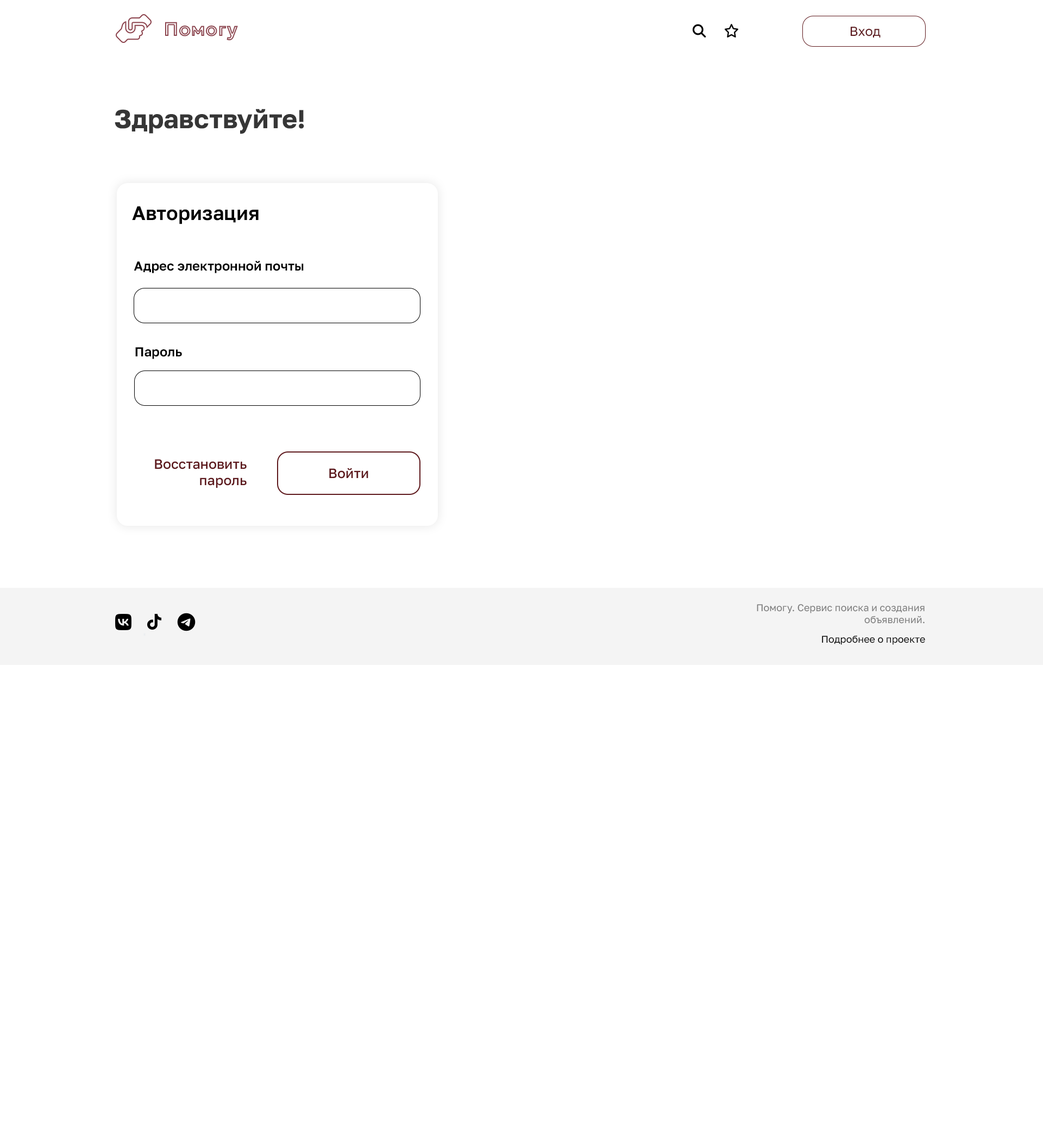
<style>
.page{position:relative;width:1043px;height:1143px;background:#ffffff}
.page>*{position:absolute;margin:0}
.t1{font:19.6px "Geologica-Bold"}
.t2{font:13px "GolosText-Regular";color:#5e191d}
.t3{font:26.1px "GolosText-Bold";color:#363636}
.t4{font:19.6px "GolosText-SemiBold";color:#020202}
.t5{font:13px "GolosText-SemiBold";color:#020202}
.t6{font:13.6px "GolosText-Medium";color:#5e191d}
.t7{font:9.8px "GolosText-Regular";color:#7c7c7c}
.t8{font:9.8px "GolosText-Regular";color:#000000}
</style>
<div class="page">
<p class="t1" style="left:165px;top:22px;width:73px;height:19px">Помогу</p>
<p class="t2" style="left:850px;top:27px;width:31px;height:11px">Вход</p>
<p class="t3" style="left:115px;top:109px;width:189px;height:25px">Здравствуйте!</p>
<p class="t4" style="left:132px;top:206px;width:127px;height:18px">Авторизация</p>
<p class="t5" style="left:134px;top:261px;width:170px;height:12px">Адрес электронной почты</p>
<p class="t5" style="left:135px;top:347px;width:47px;height:12px">Пароль</p>
<p class="t6" style="left:155px;top:459px;width:92px;height:29px;text-align:right">Восстановить<br>пароль</p>
<p class="t6" style="left:329px;top:468px;width:39px;height:11px">Войти</p>
<p class="t7" style="left:757px;top:604px;width:168px;height:20px;text-align:right">Помогу. Сервис поиска и создания<br>объявлений.</p>
<p class="t8" style="left:822px;top:636px;width:103px;height:9px">Подробнее о проекте</p>
</div>
